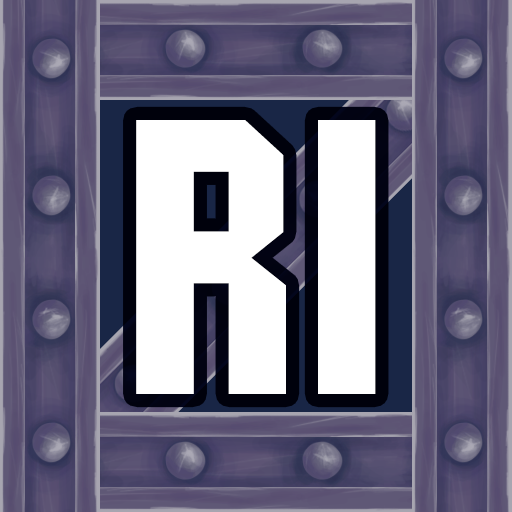
<style>
.page{position:relative;width:512px;height:512px}
.page>*{position:absolute;margin:0}
.t1{font:391.4px "MachineCTT";color:#ffffff}
</style>
<div class="page">
<p class="t1" style="left:136px;top:120px;width:240px;height:274px">RI</p>
</div>
